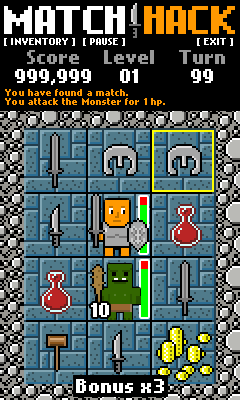
<style>
.page{position:relative;width:240px;height:400px;background:#000000}
.page>*{position:absolute;margin:0}
.t1{font:32px "NokiaCellphoneFC-Small";letter-spacing:-0.075em;color:#ffffff;text-transform:uppercase}
.t2{font:32px "NokiaCellphoneFC-Small";letter-spacing:-0.075em;color:#ff9900;text-transform:uppercase}
.t3{font:8px "NokiaCellphoneFC-Small";letter-spacing:0.01em;color:#ffffff}
.t4{font:8px "NokiaCellphoneFC-Small";letter-spacing:-0.05em;color:#ffffff}
.t5{font:16px "NokiaCellphoneFC-Small";letter-spacing:0.01em;color:#ffffff}
.t6{font:16px "NokiaCellphoneFC-Small";letter-spacing:0.01em;color:#999999}
.t7{font:8px "NokiaCellphoneFC-Small";letter-spacing:0.01em;color:#ff9900}
</style>
<div class="page">
<p class="t1" style="left:4px;top:6px;width:231px;height:28px">Match <span class="t2">Hack</span></p>
<p class="t3" style="left:4px;top:38px;width:229px;height:8px">[ INVENTORY ]  { PAUSE ]                       [ EXI<span class="t4">T </span>]</p>
<p class="t5" style="left:15px;top:50px;width:76px;height:35px;text-align:center"><span class="t6">Score<br></span>999,999</p>
<p class="t6" style="left:104px;top:50px;width:50px;height:33px;text-align:center">Level<br><span class="t5">01</span></p>
<p class="t6" style="left:179px;top:50px;width:46px;height:33px;text-align:center">Turn<br><span class="t5">99</span></p>
<p class="t7" style="left:5px;top:89px;width:160px;height:17px">You have found a match.<br>You attack the Monster for 1 hp.</p>
<p class="t5" style="left:91px;top:303px;width:18px;height:14px">10</p>
<p class="t5" style="left:76px;top:379px;width:88px;height:14px">Bonus x3</p>
</div>
